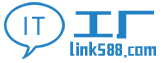
<style>
.page{position:relative;width:163px;height:63px;background:#ffffff}
.page>*{position:absolute;margin:0}
.t1{font:24.1px "MicrosoftYaHeiUI";letter-spacing:0.1em;color:#2182c6}
.t2{font:38.5px "MFBanHei_Noncommercial-Regular";letter-spacing:0.1em;color:#2182c6}
.t3{font:18px "MFBanHei_Noncommercial-Regular";letter-spacing:0.1em;color:#2182c6;scale:0.6 1}
</style>
<div class="page">
<p class="t1" style="left:24px;top:16px;width:21px;height:19px">IT</p>
<p class="t2" style="left:74px;top:10px;width:80px;height:29px">工厂</p>
<p class="t3" style="left:70px;top:41px;width:86px;height:17px">link588.com</p>
</div>
